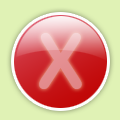
<style>
.page{position:relative;width:120px;height:120px;background:#e0f2b5}
.page>*{position:absolute;margin:0}
.t1{font:75px "ArialRoundedMTBold";color:#e48f92}
</style>
<div class="page">
<p class="t1" style="left:39px;top:33px;width:43px;height:56px">X</p>
</div>
